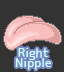
<style>
.page{position:relative;width:64px;height:72px;background:#333333}
.page>*{position:absolute;margin:0}
.t1{font:12px/10px "JK-Gothic-M";color:#c9ffff}
</style>
<div class="page">
<p class="t1" style="left:15px;top:48px;width:36px;height:22px;text-align:center">Right<br>Nipple</p>
</div>
